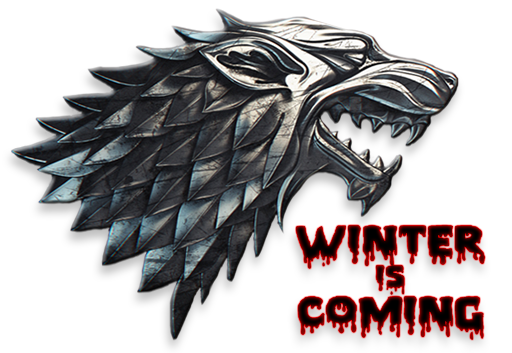
<style>
.page{position:relative;width:512px;height:353px;background:#ffffff}
.page>*{position:absolute;margin:0}
.t1{font:35.7px "PiecesNFI";scale:1.23 1}
.t2{font:23.8px "PiecesNFI";scale:1.23 1}
</style>
<div class="page">
<p class="t1" style="left:296px;top:225px;width:189px;height:115px;text-align:center">WINTER<br><span class="t2">IS<br></span>COMING</p>
</div>
